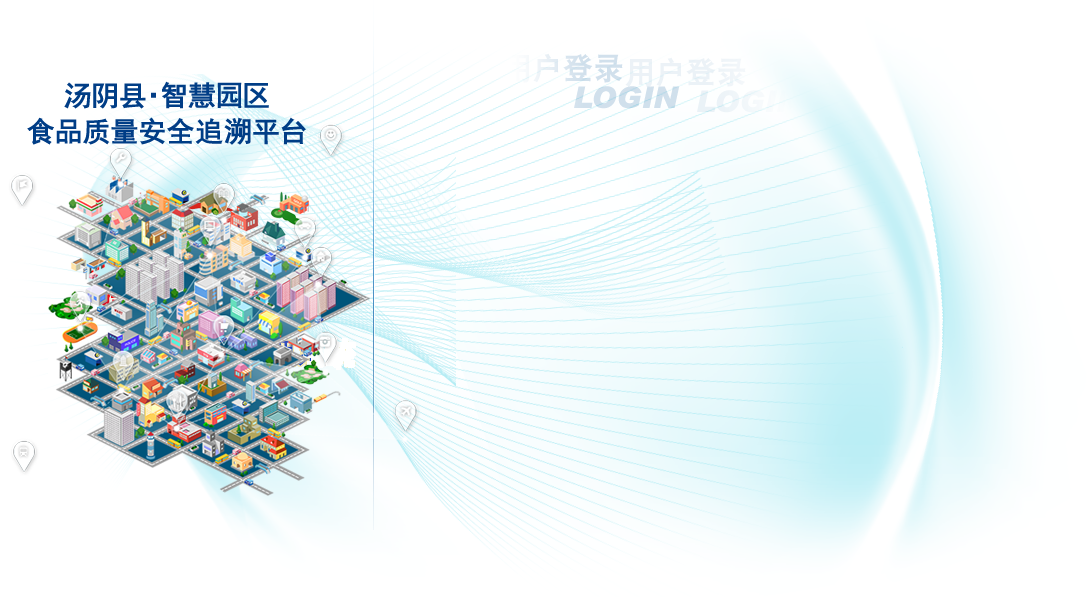
<style>
.page{position:relative;width:1087px;height:601px;background:#ffffff}
.page>*{position:absolute;margin:0}
.t1{font:28px/36px "SimHei";letter-spacing:0.05em;color:#003d86;font-weight:bold}
</style>
<div class="page">
<p class="t1" style="left:27px;top:81px;width:279px;height:64px;text-align:center">汤阴县·智慧园区<br>食品质量安全追溯平台</p>
</div>
